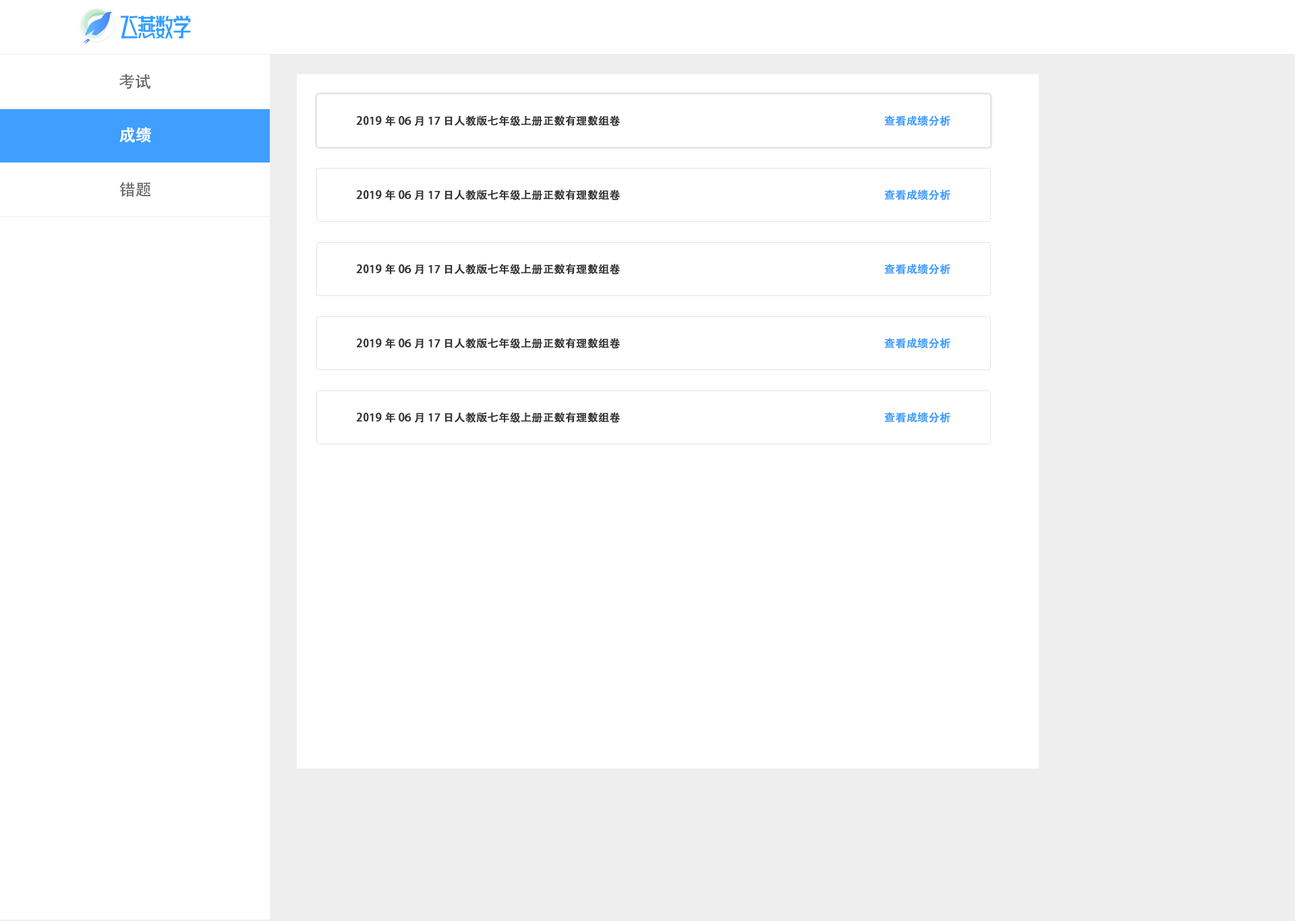
<style>
.page{position:relative;width:1295px;height:921px;background:#ffffff}
.page>*{position:absolute;margin:0}
.t1{font:16.2px "AdobeHeitiStd-Regular";color:#666666}
.t2{font:10.8px "AdobeHeitiStd-Regular";color:#333333;font-weight:bold}
.t3{font:10.8px "AdobeHeitiStd-Regular";color:#409eff;font-weight:bold}
.t4{font:16.2px "AdobeHeitiStd-Regular";color:#ffffff;font-weight:bold}
</style>
<div class="page">
<p class="t1" style="left:119px;top:73px;width:32px;height:16px">考试</p>
<p class="t2" style="left:356px;top:115px;width:264px;height:11px">2019年06月17日人教版七年级上册正数有理数组卷</p>
<p class="t3" style="left:884px;top:115px;width:66px;height:11px">查看成绩分析</p>
<p class="t4" style="left:119px;top:127px;width:32px;height:16px">成绩</p>
<p class="t1" style="left:119px;top:182px;width:32px;height:15px">错题</p>
<p class="t2" style="left:356px;top:189px;width:264px;height:11px">2019年06月17日人教版七年级上册正数有理数组卷</p>
<p class="t3" style="left:884px;top:189px;width:66px;height:11px">查看成绩分析</p>
<p class="t2" style="left:356px;top:264px;width:264px;height:10px">2019年06月17日人教版七年级上册正数有理数组卷</p>
<p class="t3" style="left:884px;top:264px;width:66px;height:10px">查看成绩分析</p>
<p class="t2" style="left:356px;top:338px;width:264px;height:11px">2019年06月17日人教版七年级上册正数有理数组卷</p>
<p class="t3" style="left:884px;top:338px;width:66px;height:11px">查看成绩分析</p>
<p class="t2" style="left:356px;top:412px;width:264px;height:11px">2019年06月17日人教版七年级上册正数有理数组卷</p>
<p class="t3" style="left:884px;top:412px;width:66px;height:11px">查看成绩分析</p>
</div>
